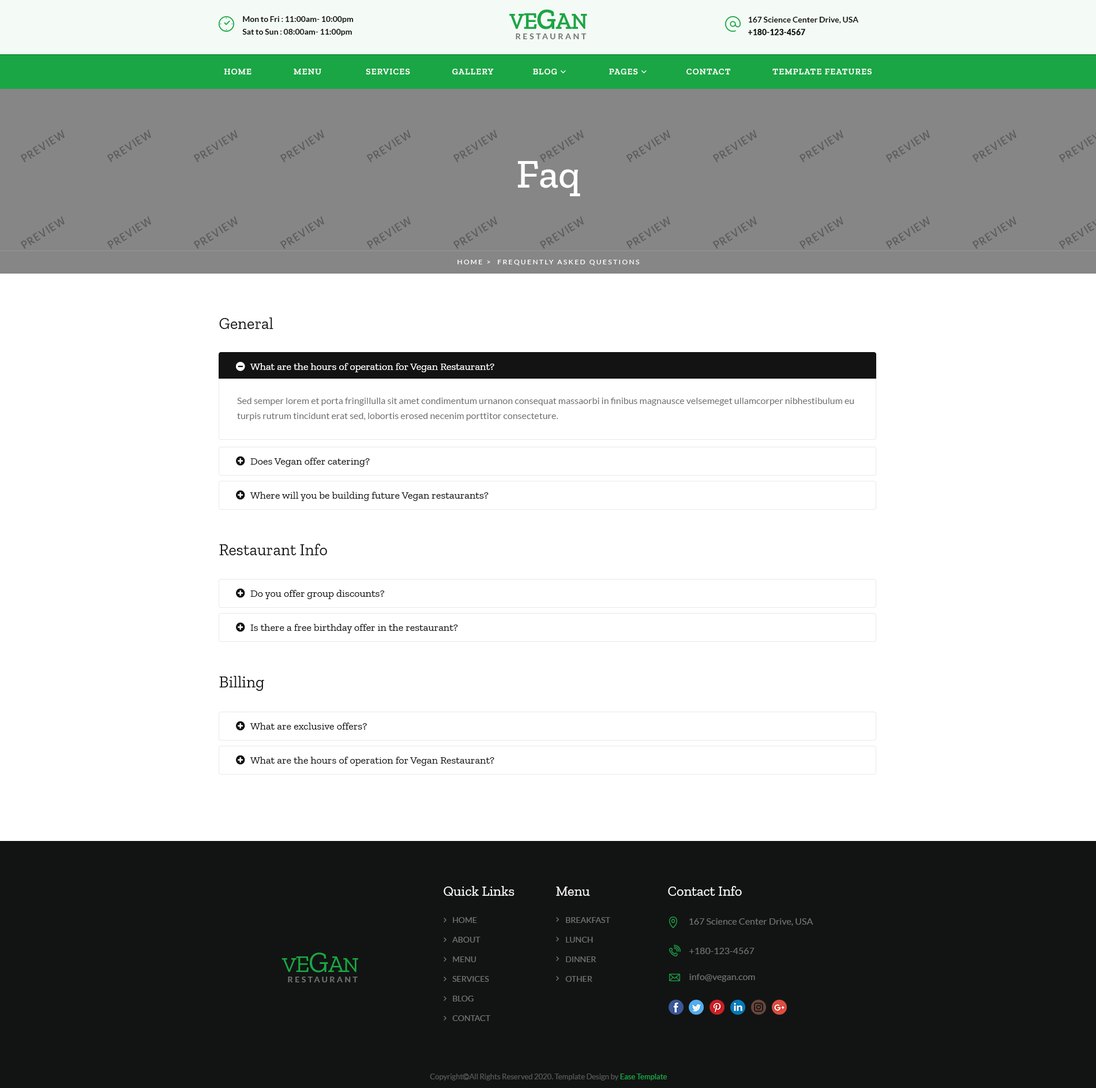
<style>
.page{position:relative;width:1096px;height:1088px;background:#ffffff}
.page>*{position:absolute;margin:0}
.t1{font:8.1px/12.7px "Lato-Bold";color:#121312}
.t2{font:8.1px/12.7px "Lato-Regular";color:#121312}
.t3{font:21.9px "ZillaSlab-SemiBold";letter-spacing:-0.03em;color:#1aa644;text-transform:uppercase}
.t4{font:24.2px "ZillaSlab-SemiBold";letter-spacing:-0.03em;color:#1aa644;text-transform:uppercase}
.t5{font:28.9px "ZillaSlab-SemiBold";letter-spacing:-0.03em;color:#1aa644;text-transform:uppercase}
.t6{font:8.1px/12.7px "Lato-Black";color:#121312}
.t7{font:8.1px "Lato-Bold";letter-spacing:0.26em;color:#6e726e;text-transform:uppercase}
.t8{font:40.4px "ZillaSlab-Medium";color:#ffffff}
.t9{font:6.9px "Lato-Regular";letter-spacing:0.2em;color:#ffffff;text-transform:uppercase}
.t10{font:16.2px "ZillaSlab-Regular";color:#121413}
.t11{font:10.4px "ZillaSlab-Regular";color:#fafdfc}
.t12{font:9.2px/15px "Lato-Regular";color:#6e726e}
.t13{font:10.4px "ZillaSlab-Regular";color:#121413}
.t14{font:13.8px "ZillaSlab-Regular";color:#ffffff}
.t15{font:8.1px/19.6px "Lato-Regular";color:#6e726e;text-transform:uppercase}
.t16{font:9.2px "Lato-Regular";color:#6e726e}
.t17{font:21.9px "ZillaSlab-Regular";letter-spacing:-0.03em;color:#1aa644;text-transform:uppercase}
.t18{font:24.2px "ZillaSlab-Regular";letter-spacing:-0.03em;color:#1aa644;text-transform:uppercase}
.t19{font:28.9px "ZillaSlab-Regular";letter-spacing:-0.03em;color:#1aa644;text-transform:uppercase}
.t20{font:8.1px "Lato-Bold";letter-spacing:0.25em;color:#6e726e;text-transform:uppercase}
</style>
<div class="page">
<p class="t1" style="left:242px;top:16px;width:112px;height:20px">Mon to Fri<span class="t2"> : </span>11:00am- 10:00pm<br>Sat to Sun<span class="t2"> : </span>08:00am- 11:00pm</p>
<p class="t3" style="left:510px;top:9px;width:77px;height:20px">V<span class="t4">e</span><span class="t5">G</span><span class="t4">a</span>n</p>
<p class="t1" style="left:748px;top:17px;width:111px;height:18px">167 Science Center Drive, USA<br><span class="t6">+180-123-4567</span></p>
<p class="t7" style="left:516px;top:33px;width:70px;height:6px">Restaurant</p>
<p class="t8" style="left:518px;top:161px;width:62px;height:35px">Faq</p>
<p class="t9" style="left:458px;top:260px;width:181px;height:5px">Home &gt;  Frequently Asked Questions</p>
<p class="t10" style="left:219px;top:317px;width:55px;height:12px">General</p>
<p class="t11" style="left:250px;top:363px;width:244px;height:9px">What are the hours of operation for Vegan Restaurant?</p>
<p class="t12" style="left:237px;top:398px;width:618px;height:23px">Sed semper lorem et porta fringillulla sit amet condimentum urnanon consequat massaorbi in finibus magnausce velsemeget ullamcorper nibhestibulum eu turpis rutrum tincidunt erat sed, lobortis erosed necenim porttitor consecteture.</p>
<p class="t13" style="left:250px;top:458px;width:120px;height:9px">Does Vegan offer catering?</p>
<p class="t13" style="left:250px;top:492px;width:239px;height:9px">Where will you be building future Vegan restaurants?</p>
<p class="t10" style="left:219px;top:544px;width:108px;height:11px">Restaurant Info</p>
<p class="t13" style="left:250px;top:590px;width:135px;height:9px">Do you offer group discounts?</p>
<p class="t13" style="left:250px;top:624px;width:208px;height:9px">Is there a free birthday offer in the restaurant?</p>
<p class="t10" style="left:219px;top:676px;width:45px;height:15px">Billing</p>
<p class="t13" style="left:250px;top:722px;width:117px;height:7px">What are exclusive offers?</p>
<p class="t13" style="left:250px;top:756px;width:244px;height:10px">What are the hours of operation for Vegan Restaurant?</p>
<p class="t14" style="left:444px;top:886px;width:71px;height:10px">Quick Links</p>
<p class="t14" style="left:556px;top:886px;width:34px;height:10px">Menu</p>
<p class="t14" style="left:668px;top:886px;width:74px;height:10px">Contact Info</p>
<p class="t15" style="left:452px;top:917px;width:38px;height:104px">Home<br>About<br>Menu<br>Services<br>Blog<br>Contact</p>
<p class="t15" style="left:565px;top:917px;width:45px;height:64px">Breakfast<br>Lunch<br>Dinner<br>Other</p>
<p class="t16" style="left:690px;top:918px;width:124px;height:8px">167 Science Center Drive, USA</p>
<p class="t17" style="left:282px;top:952px;width:76px;height:20px">V<span class="t18">e</span><span class="t19">G</span><span class="t18">a</span>n</p>
<p class="t16" style="left:690px;top:947px;width:65px;height:7px">+180-123-4567</p>
<p class="t20" style="left:288px;top:976px;width:70px;height:6px">Restaurant</p>
<p class="t16" style="left:690px;top:973px;width:65px;height:8px">info@vegan.com</p>
</div>
